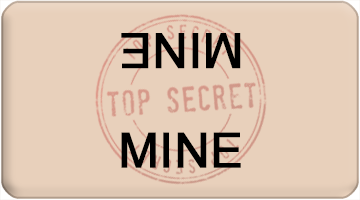
<style>
.page{position:relative;width:360px;height:200px;background:#e8d0bb}
.page>*{position:absolute;margin:0}
.t1{font:48px "ArialMT";color:#000000;font-weight:bold}
</style>
<div class="page">
<p class="t1" style="left:121px;top:33px;width:120px;height:36px;rotate:180deg">MINE</p>
<p class="t1" style="left:121px;top:132px;width:120px;height:36px">MINE</p>
</div>
